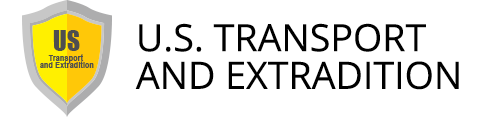
<style>
.page{position:relative;width:480px;height:117px;background:#ffffff}
.page>*{position:absolute;margin:0}
.t1{font:37.6px/37.6px "OpenSans";color:#000000}
</style>
<div class="page">
<p class="t1" style="left:135px;top:23px;width:324px;height:67px">U.S. TRANSPORT<br>AND EXTRADITION</p>
</div>
